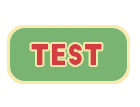
<style>
.page{position:relative;width:140px;height:107px;background:#ffffff}
.page>*{position:absolute;margin:0}
.t1{font:28px "BigJohn";color:#d33e43}
</style>
<div class="page">
<p class="t1" style="left:31px;top:44px;width:71px;height:21px">Test</p>
</div>
